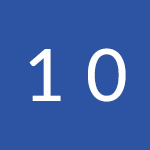
<style>
.page{position:relative;width:150px;height:150px;background:#2d54a3}
.page>*{position:absolute;margin:0}
.t1{font:72px "Lato-Regular";letter-spacing:0.3em;color:#fefefe}
</style>
<div class="page">
<p class="t1" style="left:29px;top:48px;width:97px;height:54px">10</p>
</div>
